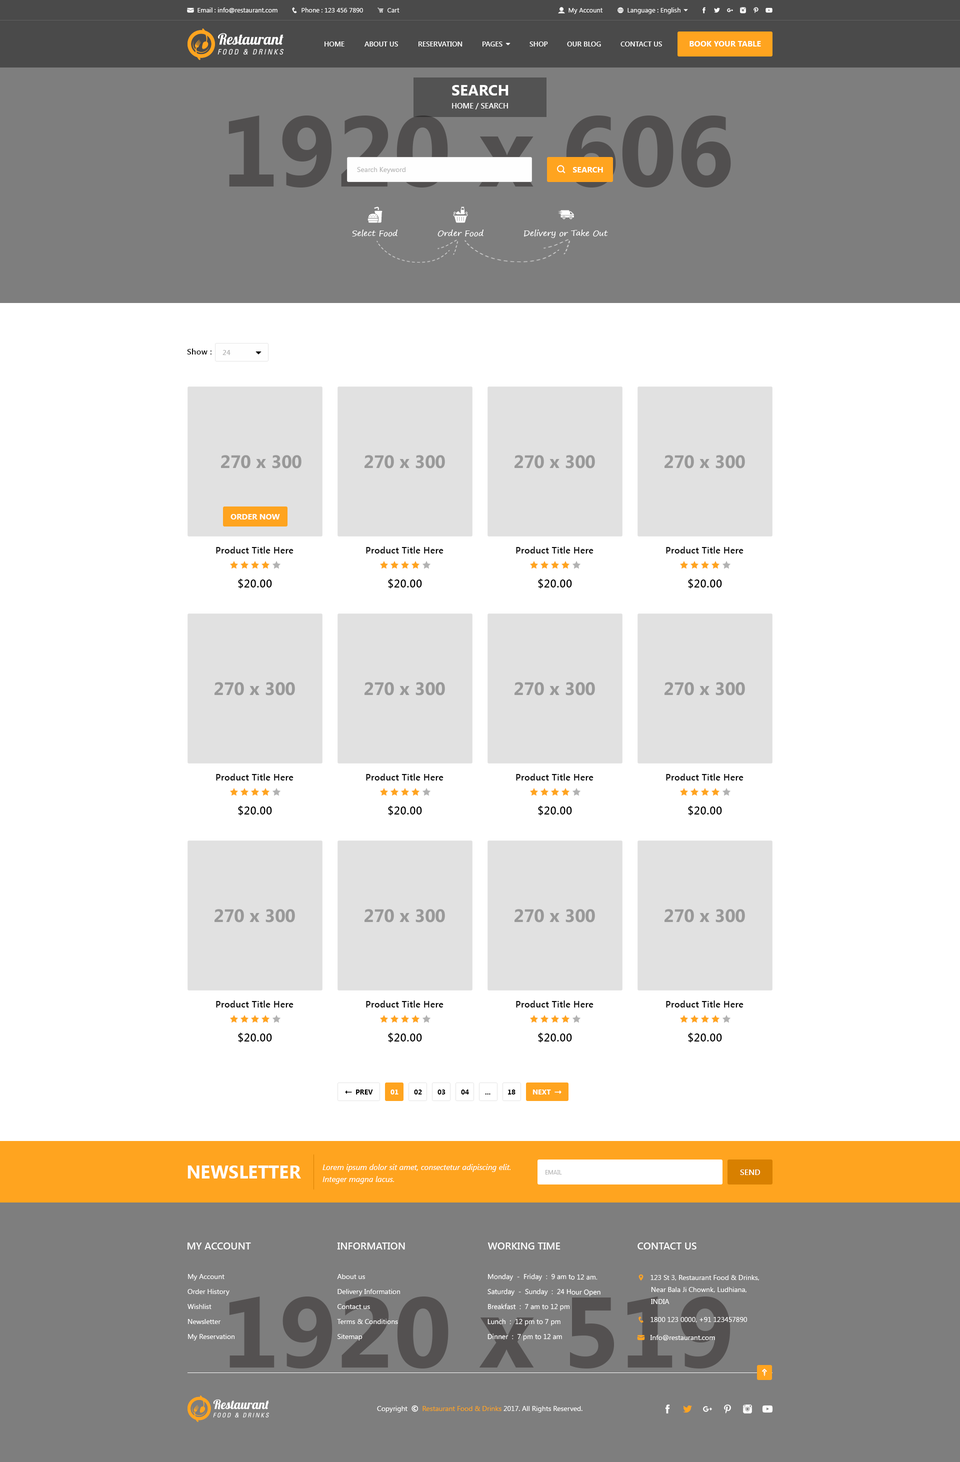
<style>
.page{position:relative;width:960px;height:1462px;background:#ffffff}
.page>*{position:absolute;margin:0}
.t1{font:7px "SegoeUI-SemiBold";color:#ffffff}
.t2{font:8px "SegoeUI-Bold";color:#ffffff}
.t3{font:15px "SegoeUI-Bold";color:#ffffff}
.t4{font:7.5px "SegoeUI-SemiBold";color:#ffffff}
.t5{font:7px "SegoeUI";color:#b2b2b2}
.t6{font:8px "SegoePrint";color:#ffffff}
.t7{font:8px "SegoeUI-SemiBold";letter-spacing:0.025em;color:#000000}
.t8{font:7px "SegoeUI-SemiBold";letter-spacing:0.025em;color:#b2b2b2}
.t9{font:18px "SegoeUI-Bold";color:#999999}
.t10{font:8px "SegoeUI-Bold";color:#fefefe}
.t11{font:9px "SegoeUI-SemiBold";letter-spacing:0.025em;color:#000000}
.t12{font:11px "SegoeUI-SemiBold";letter-spacing:0.025em;color:#000000}
.t13{font:7px "SegoeUI-Bold";color:#000000}
.t14{font:7px "SegoeUI-Bold";color:#ffffff}
.t15{font:18px "SegoeUI-Bold";color:#ffffff}
.t16{font:8px/12px "SegoeUI-Italic";color:#ffffff}
.t17{font:8px "SegoeUI-SemiBold";color:#ffffff}
.t18{font:6px "SegoeUI";color:#b2b2b2;text-transform:uppercase}
.t19{font:10px "SegoeUI-SemiBold";color:#ffffff}
.t20{font:7px/15px "SegoeUI";color:#ffffff}
.t21{font:100px "SegoeUI-Bold";color:#545151}
</style>
<div class="page">
<p class="t1" style="left:324px;top:42px;width:20px;height:4px">HOME</p>
<p class="t1" style="left:364px;top:42px;width:34px;height:4px">ABOUT US</p>
<p class="t1" style="left:418px;top:42px;width:44px;height:4px">RESERVATION</p>
<p class="t1" style="left:530px;top:42px;width:18px;height:4px">SHOP</p>
<p class="t1" style="left:567px;top:42px;width:34px;height:4px">OUR BLOG</p>
<p class="t1" style="left:620px;top:42px;width:42px;height:4px">CONTACT US</p>
<p class="t2" style="left:690px;top:41px;width:71px;height:5px">BOOK YOUR TABLE</p>
<p class="t3" style="left:452px;top:85px;width:56px;height:11px">SEARCH</p>
<p class="t4" style="left:452px;top:103px;width:56px;height:7px">HOME / SEARCH</p>
<p class="t5" style="left:357px;top:167px;width:49px;height:7px">Search Keyword</p>
<p class="t2" style="left:573px;top:167px;width:30px;height:5px">SEARCH</p>
<p class="t6" style="left:352px;top:230px;width:46px;height:6px">Select Food</p>
<p class="t6" style="left:438px;top:230px;width:46px;height:6px">Order Food</p>
<p class="t6" style="left:524px;top:230px;width:84px;height:8px">Delivery or Take Out</p>
<p class="t7" style="left:187px;top:348px;width:25px;height:6px">Show :</p>
<p class="t8" style="left:222px;top:350px;width:8px;height:5px">24</p>
<p class="t9" style="left:221px;top:455px;width:81px;height:13px">270 x 300</p>
<p class="t9" style="left:364px;top:455px;width:81px;height:13px">270 x 300</p>
<p class="t9" style="left:514px;top:455px;width:81px;height:13px">270 x 300</p>
<p class="t9" style="left:664px;top:455px;width:81px;height:13px">270 x 300</p>
<p class="t10" style="left:230px;top:514px;width:50px;height:6px">ORDER NOW</p>
<p class="t11" style="left:216px;top:546px;width:78px;height:8px">Product Title Here</p>
<p class="t11" style="left:366px;top:546px;width:78px;height:8px">Product Title Here</p>
<p class="t11" style="left:516px;top:546px;width:78px;height:8px">Product Title Here</p>
<p class="t11" style="left:666px;top:546px;width:78px;height:8px">Product Title Here</p>
<p class="t12" style="left:238px;top:578px;width:34px;height:10px">$20.00</p>
<p class="t12" style="left:388px;top:578px;width:34px;height:10px">$20.00</p>
<p class="t12" style="left:538px;top:578px;width:34px;height:10px">$20.00</p>
<p class="t12" style="left:688px;top:578px;width:34px;height:10px">$20.00</p>
<p class="t9" style="left:214px;top:682px;width:81px;height:14px">270 x 300</p>
<p class="t9" style="left:364px;top:682px;width:81px;height:14px">270 x 300</p>
<p class="t9" style="left:514px;top:682px;width:81px;height:14px">270 x 300</p>
<p class="t9" style="left:664px;top:682px;width:81px;height:14px">270 x 300</p>
<p class="t11" style="left:216px;top:774px;width:78px;height:6px">Product Title Here</p>
<p class="t11" style="left:366px;top:774px;width:78px;height:6px">Product Title Here</p>
<p class="t11" style="left:516px;top:774px;width:78px;height:6px">Product Title Here</p>
<p class="t11" style="left:666px;top:774px;width:78px;height:6px">Product Title Here</p>
<p class="t12" style="left:238px;top:806px;width:34px;height:10px">$20.00</p>
<p class="t12" style="left:388px;top:806px;width:34px;height:10px">$20.00</p>
<p class="t12" style="left:538px;top:806px;width:34px;height:10px">$20.00</p>
<p class="t12" style="left:688px;top:806px;width:34px;height:10px">$20.00</p>
<p class="t9" style="left:214px;top:909px;width:81px;height:13px">270 x 300</p>
<p class="t9" style="left:364px;top:909px;width:81px;height:13px">270 x 300</p>
<p class="t9" style="left:514px;top:909px;width:81px;height:13px">270 x 300</p>
<p class="t9" style="left:664px;top:909px;width:81px;height:13px">270 x 300</p>
<p class="t11" style="left:216px;top:1000px;width:78px;height:8px">Product Title Here</p>
<p class="t11" style="left:366px;top:1000px;width:78px;height:8px">Product Title Here</p>
<p class="t11" style="left:516px;top:1000px;width:78px;height:8px">Product Title Here</p>
<p class="t11" style="left:666px;top:1000px;width:78px;height:8px">Product Title Here</p>
<p class="t12" style="left:238px;top:1032px;width:34px;height:10px">$20.00</p>
<p class="t12" style="left:388px;top:1032px;width:34px;height:10px">$20.00</p>
<p class="t12" style="left:538px;top:1032px;width:34px;height:10px">$20.00</p>
<p class="t12" style="left:688px;top:1032px;width:34px;height:10px">$20.00</p>
<p class="t13" style="left:356px;top:1090px;width:17px;height:4px">PREV</p>
<p class="t14" style="left:390px;top:1090px;width:8px;height:4px">01</p>
<p class="t13" style="left:414px;top:1090px;width:8px;height:4px">02</p>
<p class="t13" style="left:438px;top:1090px;width:8px;height:4px">03</p>
<p class="t13" style="left:461px;top:1090px;width:8px;height:4px">04</p>
<p class="t13" style="left:485px;top:1094px;width:5px;height:0px">...</p>
<p class="t13" style="left:508px;top:1090px;width:8px;height:4px">18</p>
<p class="t14" style="left:532px;top:1090px;width:19px;height:4px">NEXT</p>
<p class="t15" style="left:188px;top:1166px;width:113px;height:12px">NEWSLETTER</p>
<p class="t16" style="left:322px;top:1164px;width:188px;height:20px">Lorem ipsum dolor sit amet, consectetur adipiscing elit. Integer magna lacus.</p>
<p class="t17" style="left:740px;top:1170px;width:20px;height:5px">SEND</p>
<p class="t18" style="left:546px;top:1170px;width:16px;height:4px">Email</p>
<p class="t19" style="left:188px;top:1242px;width:63px;height:8px">MY ACCOUNT</p>
<p class="t19" style="left:337px;top:1242px;width:68px;height:8px">INFORMATION</p>
<p class="t19" style="left:488px;top:1242px;width:72px;height:8px">WORKING TIME</p>
<p class="t19" style="left:638px;top:1242px;width:58px;height:8px">CONTACT US</p>
<p class="t20" style="left:188px;top:1274px;width:46px;height:66px">My Account<br>Order History<br>Wishlist<br>Newsletter<br>My Reservation</p>
<p class="t20" style="left:337px;top:1274px;width:63px;height:66px">About us<br>Delivery Information<br>Contact us<br>Terms &amp; Conditions<br>Sitemap</p>
<p class="t20" style="left:488px;top:1274px;width:112px;height:67px">Monday  -  Friday  :  9 am to 12 am.<br>Saturday  -  Sunday  :  24 Hour Open<br>Breakfast  :  7 am to 12 pm<br>Lunch  :  12 pm to 7 pm<br>Dinner  :  7 pm to 12 am</p>
<p class="t21" style="left:229px;top:1296px;width:501px;height:72px">1920 x 519</p>
</div>
